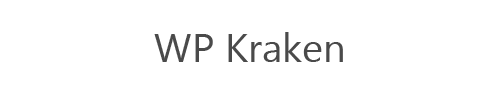
<style>
.page{position:relative;width:500px;height:100px;background:#ffffff}
.page>*{position:absolute;margin:0}
.t1{font:40px "Gadugi";color:#4a4a4a}
</style>
<div class="page">
<p class="t1" style="left:154px;top:32px;width:189px;height:30px">WP Kraken</p>
</div>
